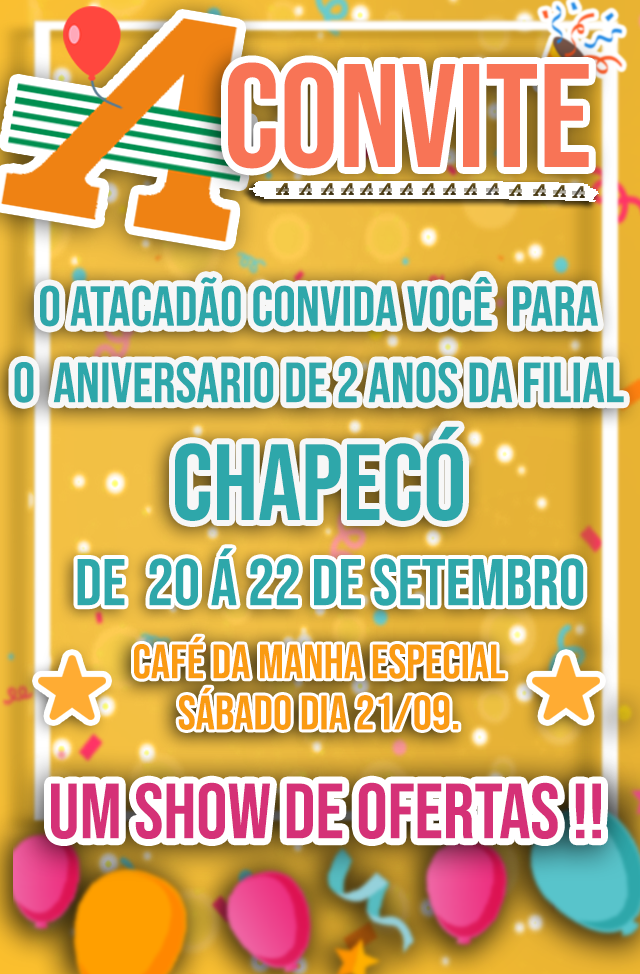
<style>
.page{position:relative;width:640px;height:974px}
.page>*{position:absolute;margin:0}
.t1{font:146.8px "BebasNeue-Regular";color:#f87456}
.t2{font:56.3px/76.3px "BebasNeue-Regular";color:#2ea7aa}
.t3{font:107.6px "BebasNeue-Regular";color:#2ea7aa}
.t4{font:65.6px "BebasNeue-Regular";color:#2ea7aa}
.t5{font:48.1px/51.1px "BebasNeue-Regular";color:#fa9b12}
.t6{font:77.9px "BebasNeue-Regular";color:#d53177}
</style>
<div class="page">
<p class="t1" style="left:228px;top:62px;width:361px;height:107px">CONVITE</p>
<p class="t2" style="left:14px;top:276px;width:610px;height:127px;text-align:center">O atacadão convida você  para  <br>o  aniversario de 2 anos da filial</p>
<p class="t3" style="left:175px;top:426px;width:288px;height:95px">chapecó</p>
<p class="t4" style="left:77px;top:548px;width:507px;height:58px">De  20 á 22 de setembro</p>
<p class="t5" style="left:134px;top:636px;width:372px;height:94px;text-align:center">Café da manha especial<br>SÁBADO DIA 21/09.</p>
<p class="t6" style="left:51px;top:782px;width:550px;height:57px">UM SHOW DE OFERTAS !!</p>
</div>
